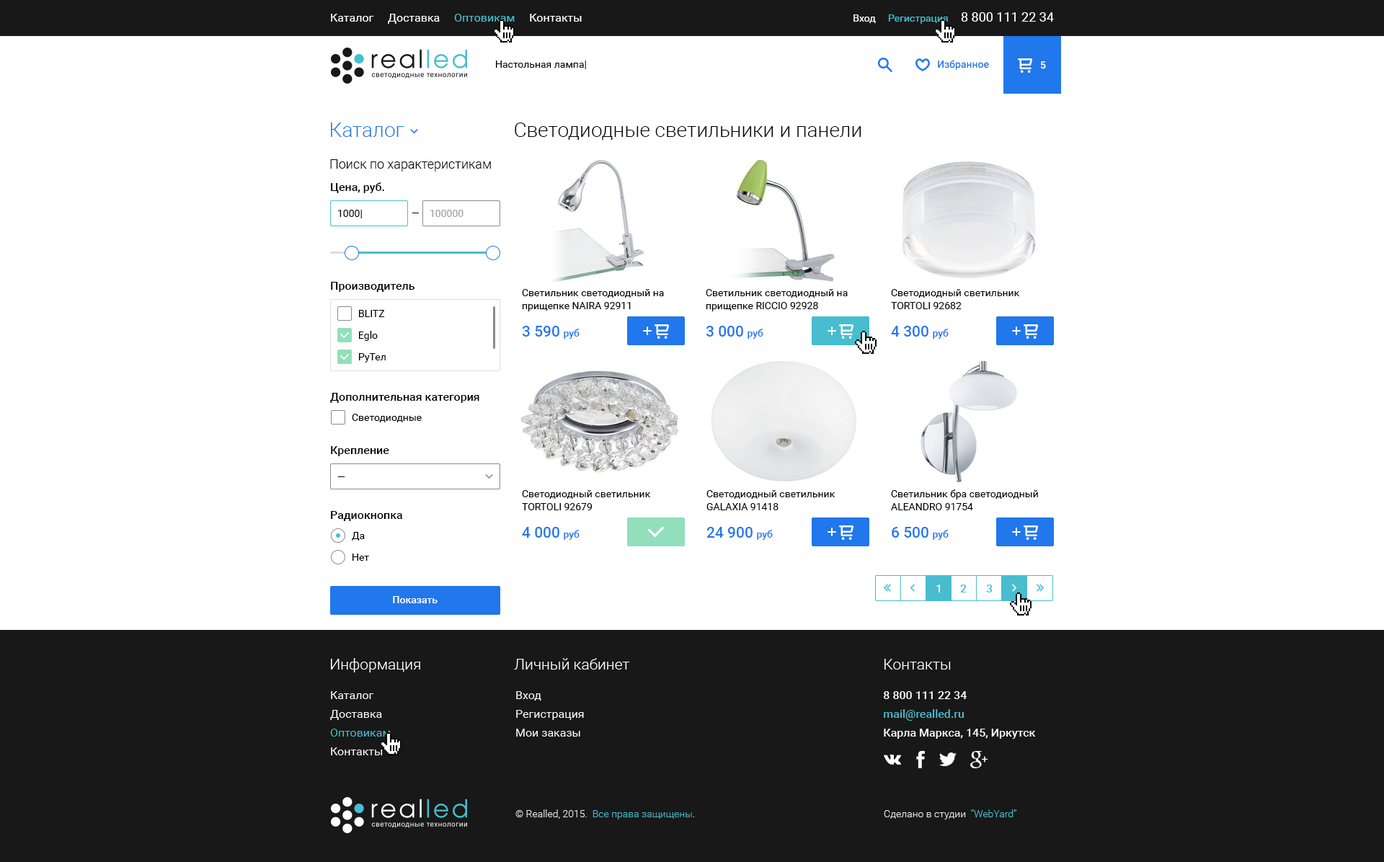
<style>
.page{position:relative;width:1384px;height:862px;background:#ffffff}
.page>*{position:absolute;margin:0}
.t1{font:11.5px "Roboto-Regular";color:#ffffff}
.t2{font:11.5px "Roboto-Regular";color:#47bdcf}
.t3{font:13px "Roboto-Regular";color:#ffffff}
.t4{font:10.1px "Roboto-Regular";color:#ffffff}
.t5{font:10.1px "Roboto-Regular";color:#47bdcf}
.t6{font:10.1px "Roboto-Regular";color:#000000}
.t7{font:10.1px "Roboto-Medium";color:#2177ec}
.t8{font:10.1px "Roboto-Medium";color:#ffffff}
.t9{font:20.2px "Roboto-Light";color:#2177ec}
.t10{font:20.2px "Roboto-Light";color:#000000}
.t11{font:13px "Roboto-Light";color:#000000}
.t12{font:11.5px "Roboto-Medium";color:#000000}
.t13{font:10.1px "Roboto-Regular";color:#a3a3a3}
.t14{font:10.1px/13px "Roboto-Regular";color:#010101}
.t15{font:15.1px "Roboto-Medium";color:#2177ec}
.t16{font:11.5px "Roboto-Medium";color:#ffffff}
.t17{font:11.5px "Roboto-Medium";color:#47bdcf}
</style>
<div class="page">
<p class="t1" style="left:331px;top:14px;width:251px;height:10px">Каталог     Доставка     <span class="t2">Оптовикам</span>     Контакты</p>
<p class="t3" style="left:853px;top:12px;width:201px;height:12px"><span class="t4">Вход     </span><span class="t5">Регистрация     </span>8 800 111 22 34</p>
<p class="t6" style="left:496px;top:61px;width:90px;height:8px">Настольная лампа|</p>
<p class="t7" style="left:938px;top:60px;width:51px;height:10px">Избранное</p>
<p class="t8" style="left:1041px;top:61px;width:5px;height:8px">5</p>
<p class="t9" style="left:331px;top:123px;width:73px;height:14px">Каталог</p>
<p class="t10" style="left:515px;top:123px;width:346px;height:17px">Светодиодные светильники и панели</p>
<p class="t11" style="left:330px;top:159px;width:161px;height:13px">Поиск по характеристикам</p>
<p class="t12" style="left:331px;top:182px;width:53px;height:11px">Цена, руб.</p>
<p class="t6" style="left:338px;top:210px;width:24px;height:8px">1000|</p>
<p class="t13" style="left:430px;top:210px;width:33px;height:7px">100000</p>
<p class="t6" style="left:411px;top:213px;width:8px;height:0px">—</p>
<p class="t12" style="left:331px;top:282px;width:84px;height:10px">Производитель</p>
<p class="t14" style="left:522px;top:289px;width:142px;height:22px">Светильник светодиодный на прищепке NAIRA 92911</p>
<p class="t14" style="left:705px;top:289px;width:142px;height:22px">Светильник светодиодный на прищепке RICCIO 92928</p>
<p class="t14" style="left:891px;top:289px;width:129px;height:20px">Светодиодный светильник <br>TORTOLI 92682</p>
<p class="t6" style="left:359px;top:310px;width:26px;height:7px">BLITZ</p>
<p class="t15" style="left:522px;top:326px;width:57px;height:13px">3 590 <span class="t7">руб</span></p>
<p class="t15" style="left:705px;top:326px;width:58px;height:13px">3 000 <span class="t7">руб</span></p>
<p class="t15" style="left:891px;top:326px;width:57px;height:13px">4 300 <span class="t7">руб</span></p>
<p class="t6" style="left:359px;top:331px;width:19px;height:10px">Eglo</p>
<p class="t6" style="left:359px;top:353px;width:27px;height:9px">РуТел</p>
<p class="t12" style="left:330px;top:393px;width:149px;height:10px">Дополнительная категория</p>
<p class="t6" style="left:352px;top:414px;width:70px;height:8px">Светодиодные</p>
<p class="t12" style="left:331px;top:446px;width:58px;height:10px">Крепление</p>
<p class="t6" style="left:337px;top:476px;width:8px;height:1px">—</p>
<p class="t14" style="left:522px;top:490px;width:129px;height:20px">Светодиодный светильник <br>TORTOLI 92679</p>
<p class="t14" style="left:706px;top:490px;width:129px;height:20px">Светодиодный светильник <br>GALAXIA 91418</p>
<p class="t14" style="left:891px;top:489px;width:147px;height:21px">Светильник бра светодиодный ALEANDRO 91754</p>
<p class="t12" style="left:331px;top:511px;width:71px;height:10px">Радиокнопка</p>
<p class="t6" style="left:352px;top:532px;width:13px;height:8px">Да</p>
<p class="t15" style="left:522px;top:527px;width:57px;height:13px">4 000 <span class="t7">руб</span></p>
<p class="t15" style="left:706px;top:527px;width:66px;height:13px">24 900 <span class="t7">руб</span></p>
<p class="t15" style="left:891px;top:527px;width:57px;height:13px">6 500 <span class="t7">руб</span></p>
<p class="t6" style="left:352px;top:553px;width:17px;height:8px">Нет</p>
<p class="t16" style="left:936px;top:584px;width:4px;height:8px">1</p>
<p class="t17" style="left:960px;top:584px;width:6px;height:8px">2</p>
<p class="t17" style="left:986px;top:584px;width:6px;height:8px">3</p>
<p class="t8" style="left:393px;top:596px;width:44px;height:7px">Показать</p>
</div>
